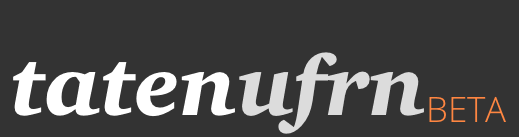
<style>
.page{position:relative;width:519px;height:137px;background:#333333}
.page>*{position:absolute;margin:0}
.t1{font:85px "Charter-BlackItalic";color:#ffffff}
.t2{font:85px "Charter-BlackItalic";color:#dcdcdc}
.t3{font:35px "OpenSans-Light";color:#ff8641}
</style>
<div class="page">
<p class="t1" style="left:13px;top:52px;width:411px;height:82px">taten<span class="t2">ufrn</span></p>
<p class="t3" style="left:429px;top:96px;width:77px;height:26px">BETA</p>
</div>
